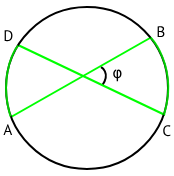
<style>
.page{position:relative;width:174px;height:176px;background:#ffffff}
.page>*{position:absolute;margin:0}
.t1{font:15.2px "PTSans-Regular";color:#000000}
.t2{font:15.2px "DejaVuSans";color:#000000}
</style>
<div class="page">
<p class="t1" style="left:4px;top:30px;width:9px;height:12px">D</p>
<p class="t1" style="left:157px;top:26px;width:8px;height:12px">B</p>
<p class="t2" style="left:113px;top:69px;width:9px;height:13px">φ</p>
<p class="t1" style="left:3px;top:124px;width:10px;height:11px">A</p>
<p class="t1" style="left:163px;top:125px;width:8px;height:12px">C</p>
</div>
